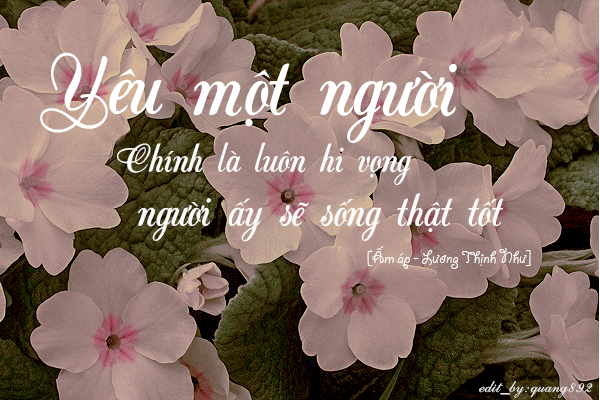
<style>
.page{position:relative;width:600px;height:400px}
.page>*{position:absolute;margin:0}
.t1{font:90.1px "UTM-ViceroyJF";color:#ffffff}
.t2{font:42px "UTM-ViceroyJF";color:#ffffff}
.t3{font:48px "UTM-ViceroyJF";color:#ffffff}
.t4{font:18px "SVN-Gidry";color:#ffffff}
.t5{font:18px "UTM-Beautiful-Caps";color:#ffffff}
</style>
<div class="page">
<p class="t1" style="left:40px;top:52px;width:417px;height:91px">Yêu một người</p>
<p class="t2" style="left:117px;top:142px;width:295px;height:43px">Chính là luôn hi vọng</p>
<p class="t3" style="left:138px;top:193px;width:365px;height:49px">người ấy sẽ sống thật tốt</p>
<p class="t4" style="left:367px;top:246px;width:164px;height:23px">[Ấm áp - Lương Thịnh Như]</p>
<p class="t5" style="left:479px;top:381px;width:114px;height:17px">edit_by:quang892</p>
</div>
